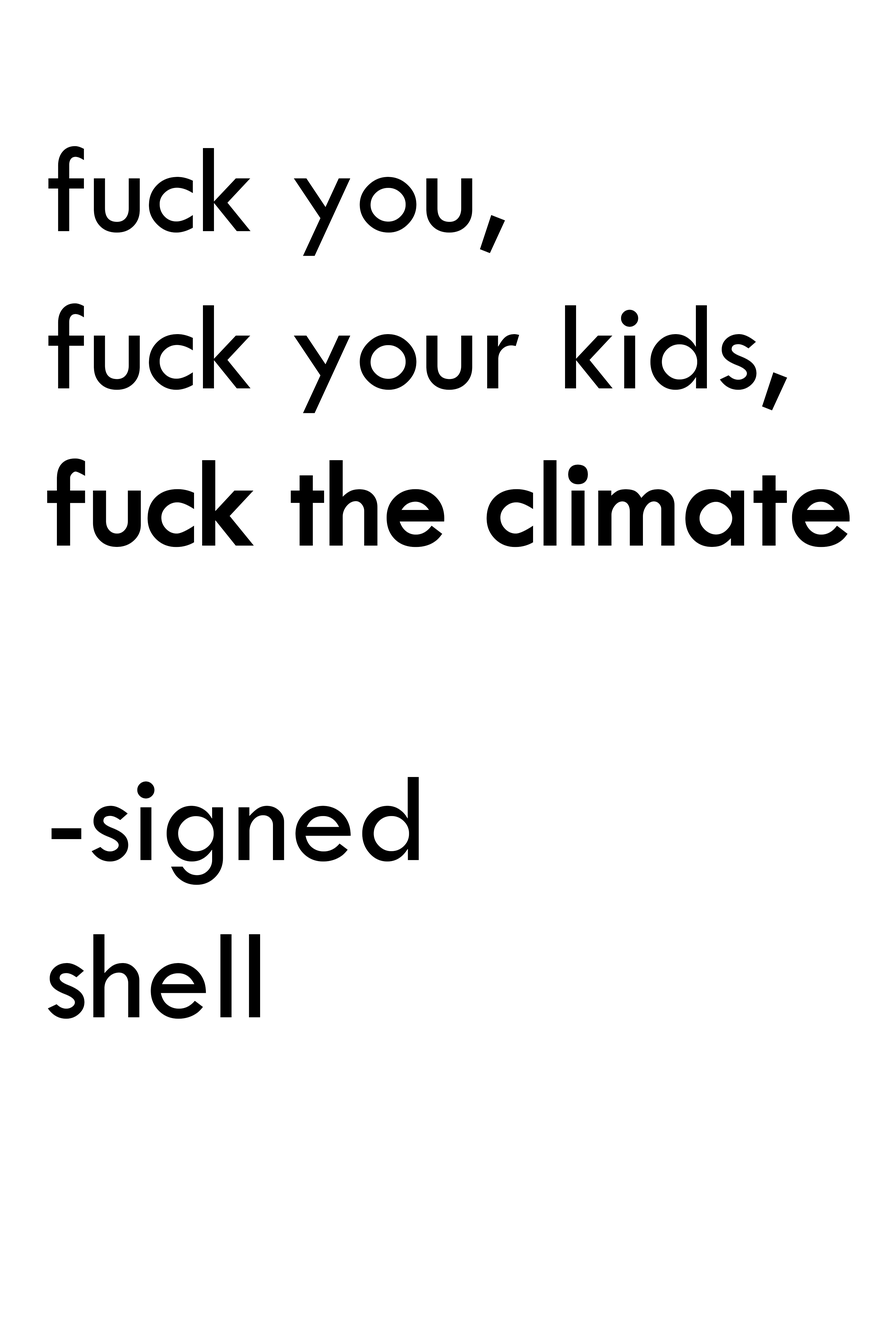
<style>
.page{position:relative;width:892px;height:1337px;background:#ffffff}
.page>*{position:absolute;margin:0}
.t1{font:131.1px "TwCenMT-Md";color:#000000}
.t2{font:131.1px "TwCenMT-SmBd";color:#000000}
</style>
<div class="page">
<p class="t1" style="left:47px;top:146px;width:802px;height:873px">fuck you, <br>fuck your kids,<br><span class="t2">fuck the climate<br></span><br>-signed <br>shell</p>
</div>
